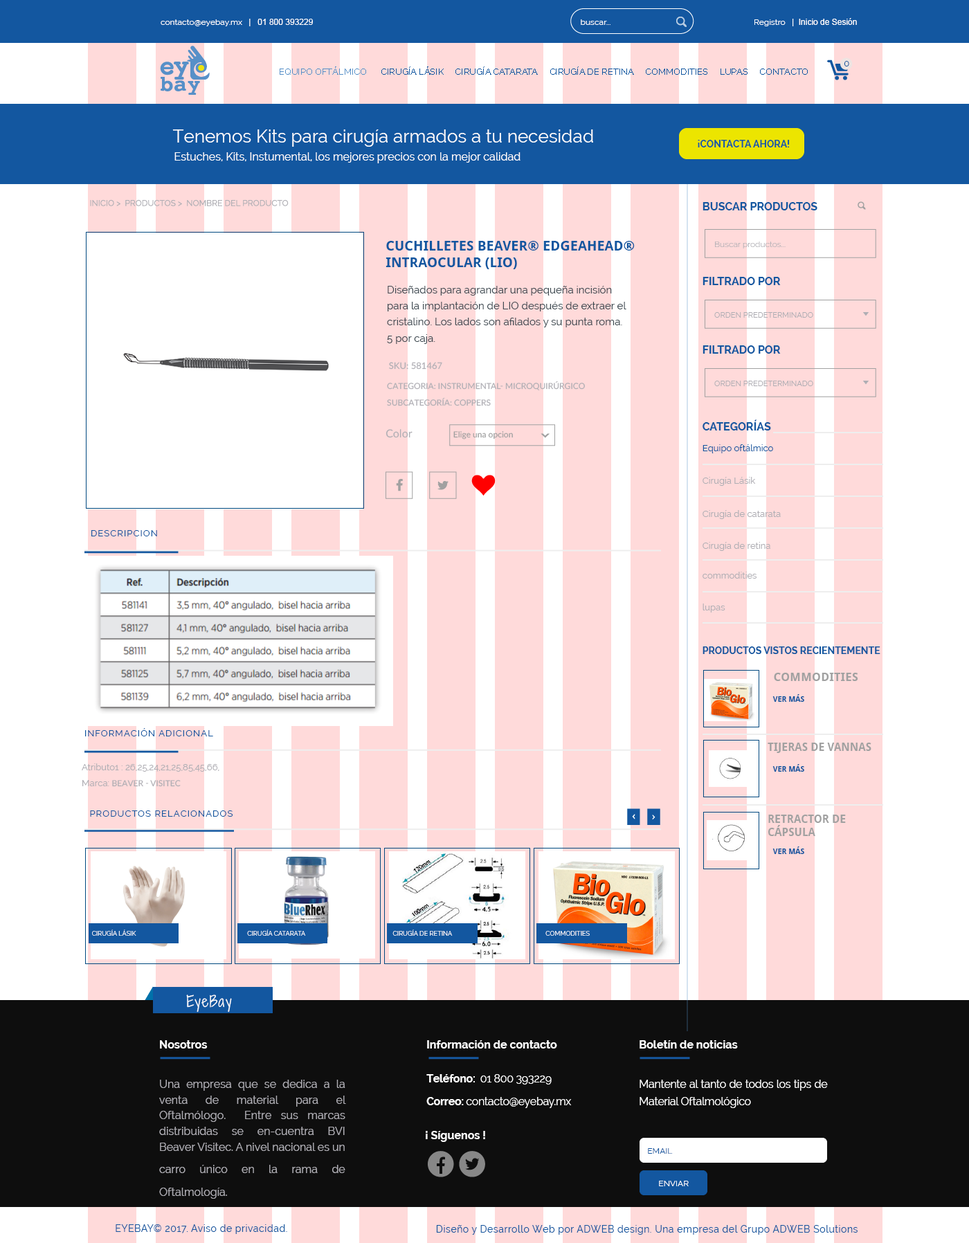
<style>
.page{position:relative;width:969px;height:1243px;background:#ffffff}
.page>*{position:absolute;margin:0}
.t1{font:8.3px "Raleway";color:#ffffff}
.t2{font:8.3px "ArialMT";color:#ffffff}
.t3{font:9px "Raleway";color:#1357a0;text-transform:uppercase}
.t4{font:18.1px "Raleway";color:#ffffff}
.t5{font:9.7px "Raleway-Bold";color:#1357a0;text-transform:uppercase}
.t6{font:11.1px "Raleway";color:#ffffff}
.t7{font:11.1px "Raleway-Bold";color:#1357a0;text-transform:uppercase}
.t8{font:13.8px "DroidSans-Bold";color:#1357a0;text-transform:uppercase}
.t9{font:8.3px "Raleway-Light";color:#afaeb4}
.t10{font:10.4px/16.2px "Raleway";color:#3f4a52}
.t11{font:7.6px "Raleway";color:#afaeb4}
.t12{font:9px "Lato-Regular";color:#afaeb4}
.t13{font:8.3px/16.2px "Lato-Regular";color:#afaeb4;text-transform:uppercase}
.t14{font:11.1px "Lato-Regular";color:#afaeb4}
.t15{font:8.3px "Lato-Regular";color:#a1a1a1}
.t16{font:9px "Raleway";color:#1357a0}
.t17{font:9px "Raleway";color:#afaeb4}
.t18{font:9px "Raleway";letter-spacing:0.08em;color:#1357a0}
.t19{font:12px "DroidSans-Bold";color:#a1a1a1;text-transform:uppercase}
.t20{font:7.6px "DroidSans-Bold";color:#1357a0;text-transform:uppercase}
.t21{font:11.1px "DroidSans-Bold";color:#a1a1a1;text-transform:uppercase}
.t22{font:9px/16.2px "Raleway";color:#afaeb4}
.t23{font:6.3px "Raleway";color:#ffffff;text-transform:uppercase}
.t24{font:14.5px "ShadowsIntoLight";letter-spacing:0.08em;color:#ffffff}
.t25{font:11.1px/15.6px "Raleway";color:#afaeb4}
.t26{font:11.1px/22.5px "Raleway-Bold";color:#ffffff}
.t27{font:11.1px/22.5px "Raleway";color:#afaeb4}
.t28{font:11.1px/17px "Raleway-Bold";letter-spacing:-0.02em;color:#ffffff}
.t29{font:11.1px/11.5px "Raleway-Bold";letter-spacing:-0.02em;color:#ffffff}
.t30{font:11.1px/11.5px "Raleway";letter-spacing:-0.02em;color:#ffffff}
.t31{font:11.1px/17px "Raleway";letter-spacing:-0.02em;color:#ffffff}
.t32{font:11.1px "Raleway-Bold";color:#ffffff}
.t33{font:8.3px "Raleway";color:#1357a0;text-transform:uppercase}
.t34{font:8.3px "Raleway";color:#ffffff;text-transform:uppercase}
.t35{font:9.7px "Raleway";letter-spacing:0.04em;color:#1357a0}
</style>
<div class="page">
<p class="t1" style="left:161px;top:19px;width:152px;height:7px">contacto@eyebay.mx   <span class="t2">|   01 800 393229</span></p>
<p class="t1" style="left:581px;top:19px;width:30px;height:6px">buscar...</p>
<p class="t2" style="left:755px;top:18px;width:102px;height:8px"><span class="t1">Registro   </span>|  Inicio de Sesión</p>
<p class="t3" style="left:844px;top:61px;width:5px;height:5px">0</p>
<p class="t4" style="left:172px;top:129px;width:421px;height:18px">Tenemos Kits para cirugía armados a tu necesidad</p>
<p class="t5" style="left:698px;top:140px;width:92px;height:7px">¡Contacta ahora!</p>
<p class="t6" style="left:174px;top:152px;width:347px;height:11px">Estuches, Kits, Instumental, los mejores precios con la mejor calidad</p>
<p class="t7" style="left:703px;top:202px;width:115px;height:8px">bUSCAR PRODUCTOS</p>
<p class="t8" style="left:386px;top:241px;width:249px;height:28px">Cuchilletes Beaver® EdgeAhead® <br>intraocular (LIO)</p>
<p class="t9" style="left:715px;top:242px;width:71px;height:7px">Buscar productos...</p>
<p class="t7" style="left:703px;top:277px;width:78px;height:8px">Filtrado por</p>
<p class="t10" style="left:387px;top:286px;width:240px;height:58px;text-align:justify">Diseñados para agrandar una pequeña incisión<br>para la implantación de LIO después de extraer el<br>cristalino. Los lados son afilados y su punta roma.<br>5 por caja.</p>
<p class="t11" style="left:714px;top:312px;width:99px;height:6px">ORDEN PREDETERMINADO</p>
<p class="t7" style="left:703px;top:345px;width:78px;height:9px">Filtrado por</p>
<p class="t12" style="left:389px;top:362px;width:53px;height:8px">SKU: 581467</p>
<p class="t13" style="left:387px;top:381px;width:198px;height:25px;text-align:justify">Categoria: INSTRUMENTAL- MICROQUIRÚRGICO<br>subcategoría: coppers</p>
<p class="t11" style="left:714px;top:381px;width:99px;height:5px">ORDEN PREDETERMINADO</p>
<p class="t7" style="left:703px;top:420px;width:68px;height:11px">CATEGORÍAS</p>
<p class="t14" style="left:386px;top:429px;width:27px;height:9px">Color</p>
<p class="t15" style="left:453px;top:431px;width:60px;height:9px">Elige una opcion</p>
<p class="t16" style="left:703px;top:444px;width:70px;height:9px">Equipo oftálmico</p>
<p class="t17" style="left:703px;top:477px;width:53px;height:9px">Cirugía Lásik</p>
<p class="t17" style="left:703px;top:510px;width:78px;height:9px">Cirugía de catarata</p>
<p class="t18" style="left:91px;top:530px;width:66px;height:7px">DESCRIPCION</p>
<p class="t17" style="left:703px;top:542px;width:68px;height:9px">Cirugía de retina</p>
<p class="t17" style="left:703px;top:572px;width:54px;height:7px">commodities</p>
<p class="t17" style="left:703px;top:604px;width:23px;height:9px">lupas</p>
<p class="t5" style="left:703px;top:647px;width:178px;height:7px">productos vistos recientemente</p>
<p class="t19" style="left:774px;top:673px;width:84px;height:8px">commodities</p>
<p class="t20" style="left:773px;top:694px;width:31px;height:8px">ver más</p>
<p class="t18" style="left:85px;top:728px;width:128px;height:9px">INFORMACIÓN ADICIONAL</p>
<p class="t21" style="left:768px;top:743px;width:104px;height:10px">tijeras de vannas</p>
<p class="t22" style="left:82px;top:764px;width:137px;height:23px;text-align:justify">Atributo1 : 26,25,24,21,25,85,45,66,<br>Marca: <span class="t13">beaver - visitec</span></p>
<p class="t20" style="left:773px;top:764px;width:31px;height:8px">ver más</p>
<p class="t18" style="left:90px;top:811px;width:143px;height:6px">PRODUCTOS RELACIONADOS</p>
<p class="t21" style="left:768px;top:815px;width:78px;height:21px">retractor de <br>cápsula</p>
<p class="t20" style="left:773px;top:847px;width:31px;height:7px">ver más</p>
<p class="t23" style="left:92px;top:930px;width:44px;height:6px">Cirugía lásik</p>
<p class="t23" style="left:247px;top:930px;width:59px;height:6px">Cirugía Catarata</p>
<p class="t23" style="left:393px;top:930px;width:60px;height:6px">Cirugía de Retina</p>
<p class="t23" style="left:546px;top:931px;width:44px;height:5px">Commodities</p>
<p class="t24" style="left:186px;top:995px;width:46px;height:18px">EyeBay</p>
<p class="t25" style="left:159px;top:1041px;width:187px;height:158px;text-align:justify"><span class="t26">Nosotros<br><br></span><span class="t27">U</span>na empresa que se dedica a la venta de material para el Oftalmólogo.  Entre sus marcas distribuidas se en-cuentra BVI Beaver Visitec. A nivel nacional es un carro único en <span class="t27">la rama de Oftalmología.</span></p>
<p class="t26" style="left:426px;top:1041px;width:146px;height:67px;text-align:justify">Información de contacto<br><br><span class="t28">T</span><span class="t29">eléfono: </span><span class="t30"> 01 800 393229  <br><br></span><span class="t29">Correo: </span><span class="t30">contacto@eyebay.mx</span></p>
<p class="t31" style="left:640px;top:1041px;width:188px;height:67px;text-align:justify"><span class="t26">Boletín de noticias<br><br></span>Mantente al tanto de todos los tips de Material Oftalmológico</p>
<p class="t32" style="left:426px;top:1131px;width:59px;height:11px">¡ Síguenos !</p>
<p class="t33" style="left:648px;top:1149px;width:25px;height:5px">EMAIL</p>
<p class="t34" style="left:659px;top:1181px;width:30px;height:6px">enviar</p>
<p class="t35" style="left:116px;top:1225px;width:171px;height:9px">EYEBAY© 2017. Aviso de privacidad.</p>
<p class="t35" style="left:436px;top:1225px;width:422px;height:10px">Diseño y Desarrollo Web por ADWEB design. Una empresa del Grupo ADWEB Solutions</p>
</div>
